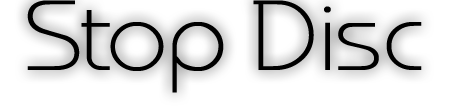
<style>
.page{position:relative;width:449px;height:110px;background:#ffffff}
.page>*{position:absolute;margin:0}
.t1{font:100px "MonaKo";color:#000000;scale:1.1 1}
</style>
<div class="page">
<p class="t1" style="left:27px;top:0px;width:395px;height:93px">Stop Disc</p>
</div>
